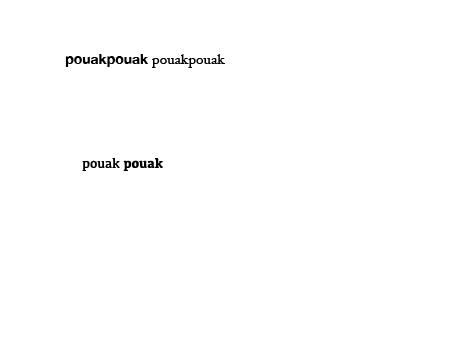
<style>
.page{position:relative;width:454px;height:340px;background:#ffffff}
.page>*{position:absolute;margin:0}
.t1{font:14px "HelveticaNeue-Bold";color:#000000}
.t2{font:14px "HoeflerText-Regular";color:#000000}
.t3{font:14px "Kefa-Regular";color:#000000}
.t4{font:14px "Kefa-Bold";color:#000000}
</style>
<div class="page">
<p class="t1" style="left:65px;top:54px;width:160px;height:14px">pouakpouak <span class="t2">pouakpouak</span></p>
<p class="t3" style="left:82px;top:158px;width:81px;height:13px">pouak <span class="t4">pouak</span></p>
</div>
